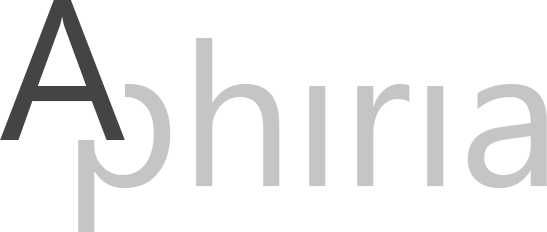
<style>
.page{position:relative;width:547px;height:232px;background:#ffffff}
.page>*{position:absolute;margin:0}
.t1{font:200px "SegoeUISymbol";color:#444444}
.t2{font:200px "SegoeUISymbol";color:#c5c5c5}
</style>
<div class="page">
<p class="t1" style="left:0px;top:0px;width:125px;height:140px">A</p>
<p class="t2" style="left:78px;top:38px;width:469px;height:194px">phiria</p>
</div>
